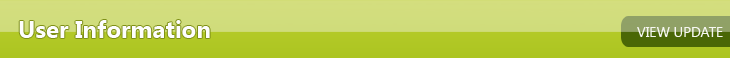
<style>
.page{position:relative;width:730px;height:58px}
.page>*{position:absolute;margin:0}
.t1{font:24px "SegoeUI-Bold";color:#fefefe}
.t2{font:14px "SegoeUI";color:#f6f7f1}
</style>
<div class="page">
<p class="t1" style="left:19px;top:20px;width:191px;height:18px">User Information</p>
<p class="t2" style="left:637px;top:27px;width:86px;height:10px">VIEW UPDATE</p>
</div>
